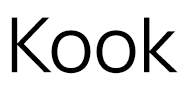
<style>
.page{position:relative;width:189px;height:90px;background:#ffffff}
.page>*{position:absolute;margin:0}
.t1{font:76px "Manrope-Regular";color:#000000}
</style>
<div class="page">
<p class="t1" style="left:11px;top:17px;width:167px;height:57px">Kook</p>
</div>
